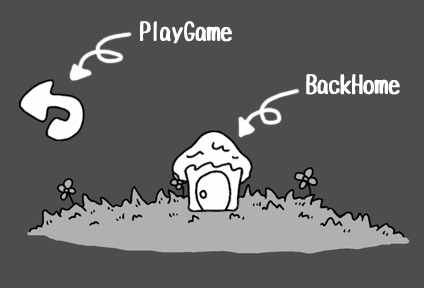
<style>
.page{position:relative;width:424px;height:288px;background:#4d4d4d}
.page>*{position:absolute;margin:0}
.t1{font:25px "Tanuki-Permanent-Marker";letter-spacing:-0.04em;color:#ffffff}
</style>
<div class="page">
<p class="t1" style="left:140px;top:21px;width:92px;height:23px">PlayGame</p>
<p class="t1" style="left:306px;top:74px;width:94px;height:21px">BackHome</p>
</div>
